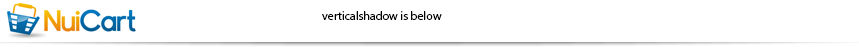
<style>
.page{position:relative;width:859px;height:47px;background:#ffffff}
.page>*{position:absolute;margin:0}
.t1{font:12px "MyriadPro-Regular";color:#000000}
</style>
<div class="page">
<p class="t1" style="left:322px;top:11px;width:120px;height:9px">verticalshadow is below</p>
</div>
